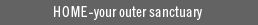
<style>
.page{position:relative;width:258px;height:25px;background:#636363}
.page>*{position:absolute;margin:0}
.t1{font:15px "TradeGothic-CondEighteen";color:#ffffff}
.t2{font:15px "TradeGothic-CondEighteen";letter-spacing:0.05em;color:#ffffff}
</style>
<div class="page">
<p class="t1" style="left:54px;top:6px;width:148px;height:14px"><span class="t2">HOME-</span>your outer sanctuary</p>
<p class="t1" style="left:54px;top:6px;width:148px;height:14px"><span class="t2">HOME-</span>your outer sanctuary</p>
</div>
